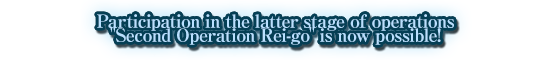
<style>
.page{position:relative;width:551px;height:60px;background:#ffffff}
.page>*{position:absolute;margin:0}
.t1{font:18px/14px "RyuminPro-ExBold";letter-spacing:-0.04em;color:#b9e0ff}
</style>
<div class="page">
<p class="t1" style="left:97px;top:14px;width:357px;height:31px;text-align:center">Participation in the latter stage of operations<br>"Second Operation Rei-go" is now possible!</p>
</div>
